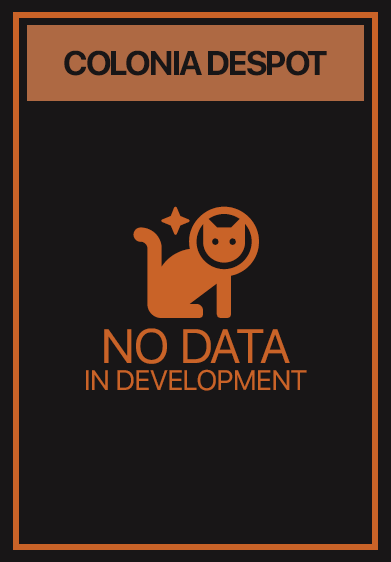
<style>
.page{position:relative;width:391px;height:562px;background:#181617}
.page>*{position:absolute;margin:0}
.t1{font:34px "SFProDisplay-Bold";letter-spacing:-0.05em;color:#181617;text-transform:uppercase}
.t2{font:28px/27px "SFUIText-Regular";letter-spacing:-0.05em;color:#ca6328;text-transform:uppercase}
.t3{font:48px/29px "SFUIText-Regular";letter-spacing:-0.05em;color:#ca6328;text-transform:uppercase}
</style>
<div class="page">
<p class="t1" style="left:64px;top:50px;width:263px;height:26px">Colonia Despot</p>
<p class="t2" style="left:86px;top:328px;width:221px;height:63px;text-align:center"><span class="t3">no data<br></span>in Development</p>
</div>
